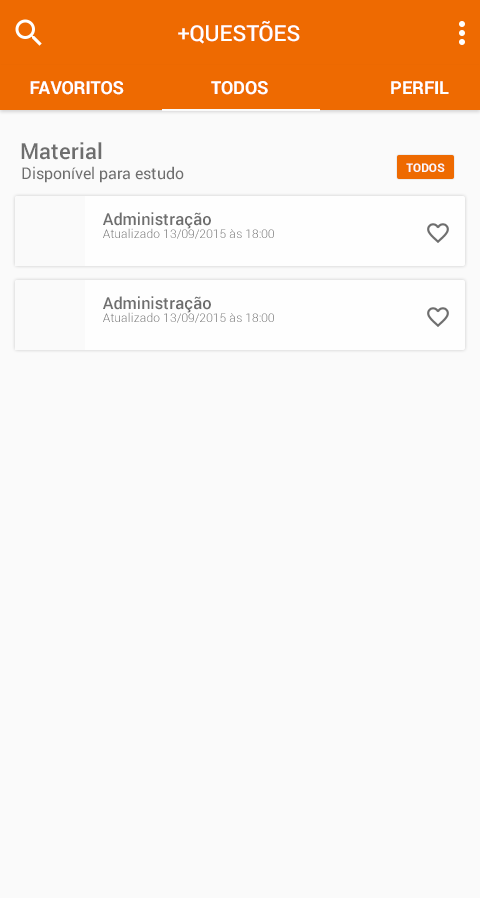
<style>
.page{position:relative;width:480px;height:898px;background:#fafafa}
.page>*{position:absolute;margin:0}
.t1{font:22px "Roboto-Medium";color:#ffffff}
.t2{font:18px "Roboto-Bold";color:#ffffff}
.t3{font:22px "Roboto-Medium";color:#6e6e6e}
.t4{font:16px "Roboto-Regular";color:#6e6e6e}
.t5{font:12px "Roboto-Bold";color:#fafafa}
.t6{font:16.4px "Roboto-Medium";color:#6e6e6e}
.t7{font:11.9px "Roboto-Light"}
</style>
<div class="page">
<p class="t1" style="left:178px;top:20px;width:122px;height:24px">+QUESTÕES</p>
<p class="t2" style="left:30px;top:81px;width:94px;height:14px">FAVORITOS</p>
<p class="t2" style="left:211px;top:81px;width:57px;height:14px">TODOS</p>
<p class="t2" style="left:391px;top:81px;width:58px;height:13px">PERFIL</p>
<p class="t3" style="left:21px;top:142px;width:81px;height:18px">Material</p>
<p class="t4" style="left:22px;top:166px;width:162px;height:17px">Disponível para estudo</p>
<p class="t5" style="left:406px;top:163px;width:39px;height:9px">TODOS</p>
<p class="t6" style="left:103px;top:212px;width:108px;height:17px">Administração</p>
<p class="t7" style="left:103px;top:228px;width:171px;height:11px">Atualizado 13/09/2015 às 18:00</p>
<p class="t6" style="left:103px;top:296px;width:108px;height:17px">Administração</p>
<p class="t7" style="left:103px;top:312px;width:171px;height:11px">Atualizado 13/09/2015 às 18:00</p>
</div>
